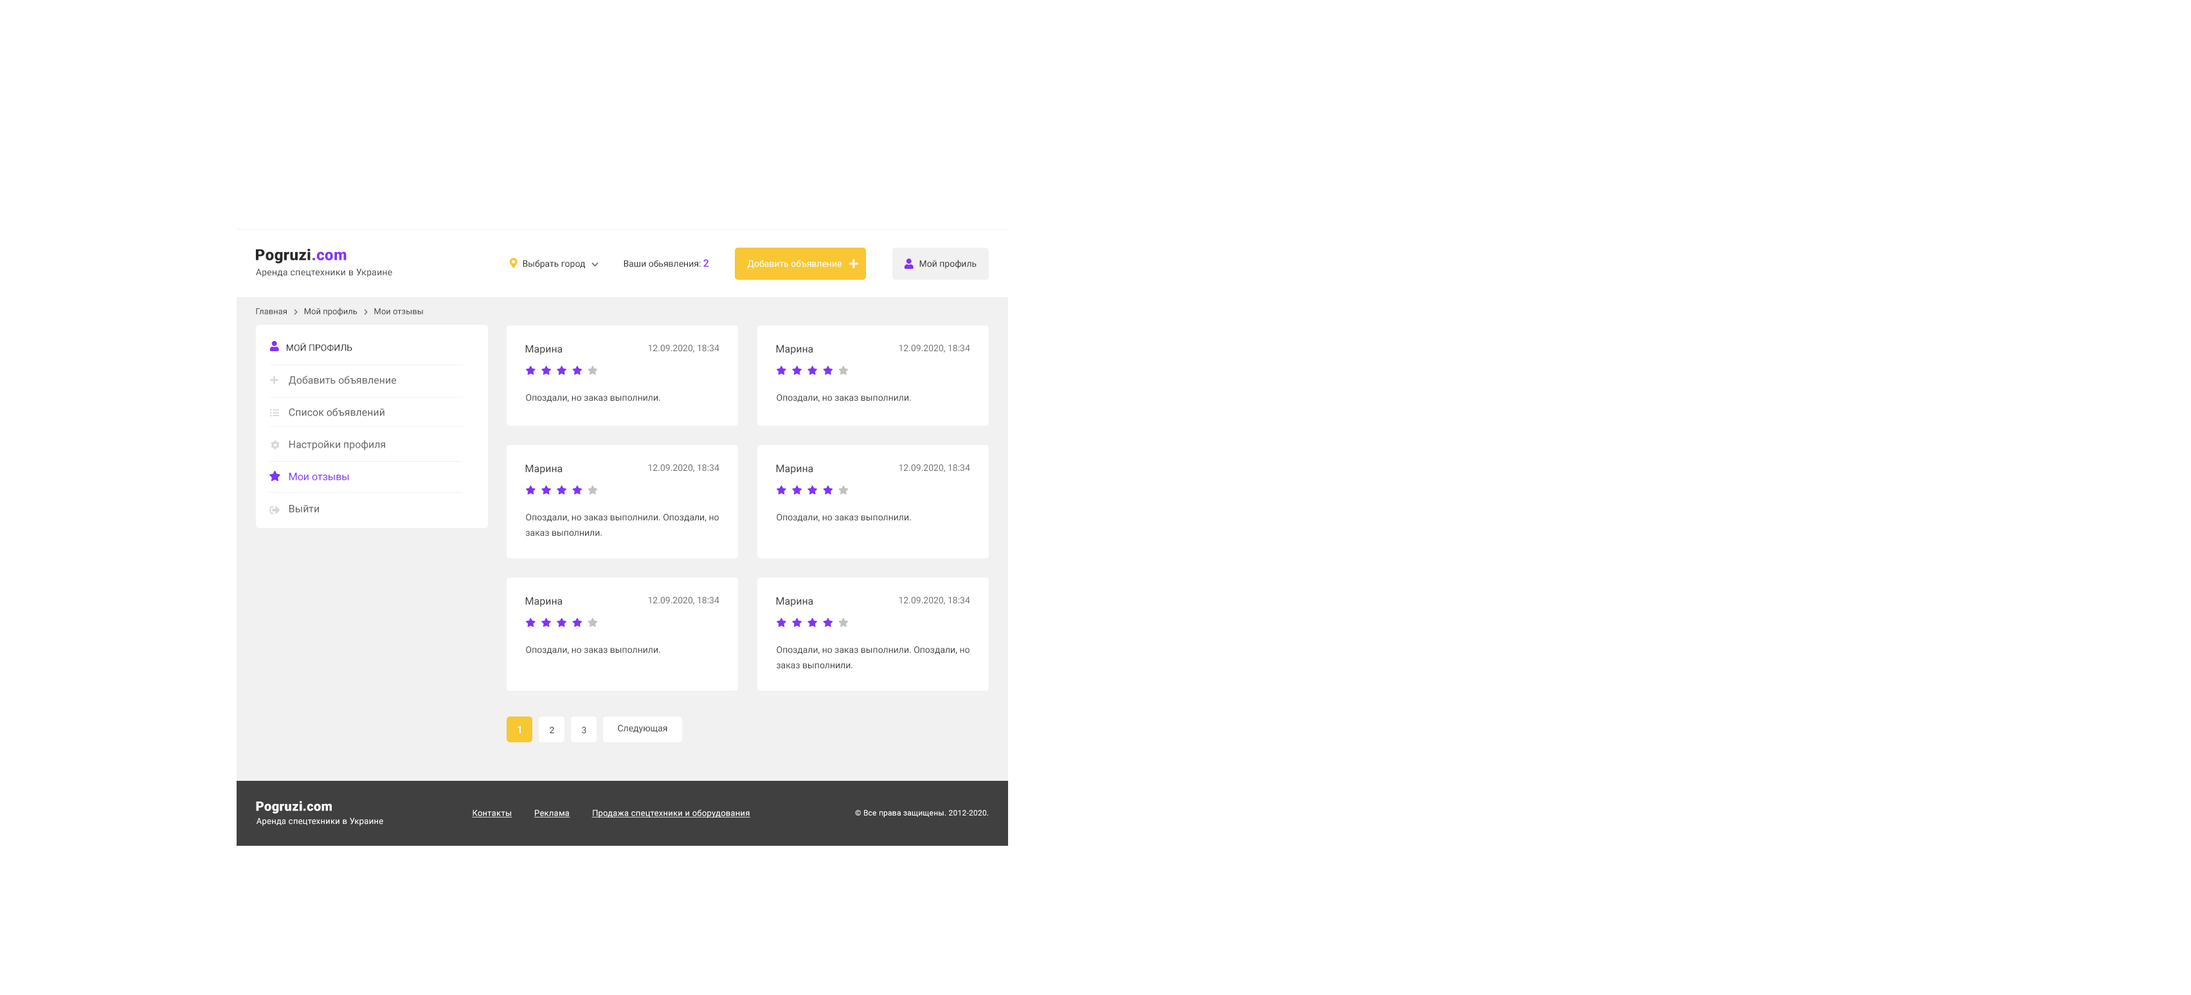
<style>
.page{position:relative;width:2191px;height:995px;background:#ffffff}
.page>*{position:absolute;margin:0}
.t1{font:15.4px "Roboto-Black";letter-spacing:0.02em;color:#292828}
.t2{font:15.4px "Roboto-Black";letter-spacing:0.02em;color:#8233f8}
.t3{font:9px "Roboto-Regular";letter-spacing:0.02em;color:#414040}
.t4{font:9px "Roboto-Regular";color:#2a2a29}
.t5{font:9px "Roboto-Regular";color:#2b2a2a}
.t6{font:10.3px "Roboto-Medium";color:#8233f8}
.t7{font:9px "Roboto-Regular";color:#ffffff}
.t8{font:8.4px "Roboto-Regular";color:#414040}
.t9{font:9px "Roboto-Regular";color:#292828;text-transform:uppercase}
.t10{font:10.3px "Roboto-Regular";color:#403f3f}
.t11{font:9px "Roboto-Regular";color:#706e6e}
.t12{font:10.3px/32.1px "Roboto-Regular";color:#676666}
.t13{font:10.3px/32.1px "Roboto-Regular";color:#615f5f}
.t14{font:10.3px/32.1px "Roboto-Regular";color:#8233f8}
.t15{font:9px "Roboto-Regular";color:#403f3f}
.t16{font:9px/15.4px "Roboto-Regular";color:#403f3f}
.t17{font:10.3px "Roboto-Medium";color:#ffffff}
.t18{font:9px "Roboto-Regular";color:#414040}
.t19{font:12.9px "Roboto-Black";letter-spacing:0.02em;color:#ffffff}
.t20{font:8.4px "Roboto-Regular";letter-spacing:0.02em;color:#ffffff;text-decoration:underline}
.t21{font:7.7px "Roboto-Regular";letter-spacing:0.02em;color:#ffffff}
.t22{font:8.4px "Roboto-Regular";letter-spacing:0.02em;color:#fdfafa}
</style>
<div class="page">
<p class="t1" style="left:256px;top:248px;width:90px;height:16px">Pogruzi<span class="t2">.com</span></p>
<p class="t3" style="left:256px;top:269px;width:136px;height:8px">Аренда спецтехники в Украине</p>
<p class="t4" style="left:523px;top:260px;width:62px;height:9px">Выбрать город</p>
<p class="t5" style="left:624px;top:259px;width:85px;height:8px">Ваши обьявления: <span class="t6">2</span></p>
<p class="t7" style="left:747px;top:260px;width:95px;height:9px">Добавить объявление</p>
<p class="t4" style="left:919px;top:260px;width:58px;height:9px">Мой профиль</p>
<p class="t8" style="left:256px;top:307px;width:167px;height:9px">Главная        Мой профиль        Мои отзывы</p>
<p class="t9" style="left:287px;top:343px;width:65px;height:8px">Мой профиль</p>
<p class="t10" style="left:525px;top:345px;width:37px;height:10px">Марина</p>
<p class="t11" style="left:648px;top:345px;width:71px;height:7px">12.09.2020, 18:34</p>
<p class="t10" style="left:776px;top:345px;width:37px;height:10px">Марина</p>
<p class="t11" style="left:899px;top:345px;width:71px;height:7px">12.09.2020, 18:34</p>
<p class="t12" style="left:289px;top:375px;width:108px;height:137px">Добавить объявление<br><span class="t13">Список объявлений<br></span>Настройки профиля<br><span class="t14">Мои отзывы<br></span><span class="t13">Выйти</span></p>
<p class="t15" style="left:526px;top:394px;width:134px;height:8px">Опоздали, но заказ выполнили.</p>
<p class="t15" style="left:777px;top:394px;width:134px;height:8px">Опоздали, но заказ выполнили.</p>
<p class="t10" style="left:525px;top:464px;width:37px;height:10px">Марина</p>
<p class="t11" style="left:648px;top:464px;width:71px;height:8px">12.09.2020, 18:34</p>
<p class="t10" style="left:776px;top:464px;width:37px;height:10px">Марина</p>
<p class="t11" style="left:899px;top:464px;width:71px;height:8px">12.09.2020, 18:34</p>
<p class="t16" style="left:526px;top:514px;width:193px;height:22px">Опоздали, но заказ выполнили. Опоздали, но<br>заказ выполнили.</p>
<p class="t15" style="left:777px;top:514px;width:134px;height:8px">Опоздали, но заказ выполнили.</p>
<p class="t10" style="left:525px;top:597px;width:37px;height:10px">Марина</p>
<p class="t11" style="left:648px;top:597px;width:71px;height:7px">12.09.2020, 18:34</p>
<p class="t10" style="left:776px;top:597px;width:37px;height:10px">Марина</p>
<p class="t11" style="left:899px;top:597px;width:71px;height:7px">12.09.2020, 18:34</p>
<p class="t15" style="left:526px;top:646px;width:134px;height:8px">Опоздали, но заказ выполнили.</p>
<p class="t16" style="left:777px;top:646px;width:192px;height:23px">Опоздали, но заказ выполнили. Опоздали, но<br>заказ выполнили.</p>
<p class="t17" style="left:518px;top:725px;width:3px;height:8px">1</p>
<p class="t18" style="left:618px;top:724px;width:49px;height:9px">Следующая</p>
<p class="t18" style="left:550px;top:726px;width:4px;height:7px">2</p>
<p class="t18" style="left:582px;top:726px;width:4px;height:8px">3</p>
<p class="t19" style="left:256px;top:800px;width:76px;height:13px">Pogruzi.com</p>
<p class="t20" style="left:472px;top:809px;width:278px;height:9px">Контакты          Реклама          Продажа спецтехники и оборудования</p>
<p class="t21" style="left:855px;top:809px;width:133px;height:8px">© Все права защищены. 2012-2020.</p>
<p class="t22" style="left:256px;top:817px;width:127px;height:8px">Аренда спецтехники в Украине</p>
</div>
